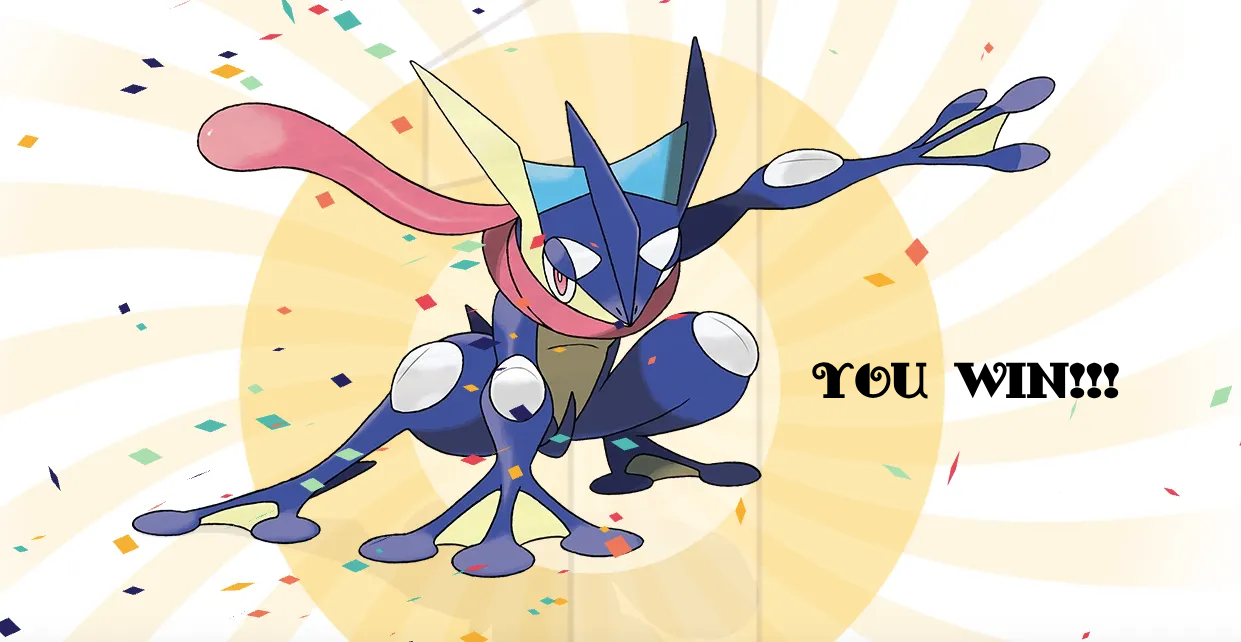
<style>
.page{position:relative;width:1241px;height:642px}
.page>*{position:absolute;margin:0}
.t1{font:50px "FancyPants";color:#000000}
</style>
<div class="page">
<p class="t1" style="left:812px;top:362px;width:307px;height:37px">You WIn!!!</p>
</div>
